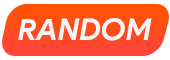
<style>
.page{position:relative;width:170px;height:60px}
.page>*{position:absolute;margin:0}
.t1{font:30px "ProductSans-BoldItalic";color:#f5f5f5}
</style>
<div class="page">
<p class="t1" style="left:18px;top:18px;width:134px;height:23px">RANDOM</p>
</div>
